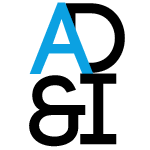
<style>
.page{position:relative;width:150px;height:150px;background:#ffffff}
.page>*{position:absolute;margin:0}
.t1{font:100px "Code-Bold";color:#0ba1e2}
.t2{font:100px "Code-Bold";color:#000000}
</style>
<div class="page">
<p class="t1" style="left:29px;top:2px;width:65px;height:72px">A</p>
<p class="t2" style="left:65px;top:3px;width:60px;height:70px">D</p>
<p class="t2" style="left:29px;top:75px;width:57px;height:72px">&amp;</p>
<p class="t2" style="left:80px;top:73px;width:37px;height:72px">I</p>
</div>
